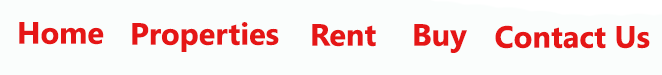
<style>
.page{position:relative;width:662px;height:75px;background:#fafdfc}
.page>*{position:absolute;margin:0}
.t1{font:30.7px "LeelawadeeUI-Bold";color:#e51616}
</style>
<div class="page">
<p class="t1" style="left:19px;top:22px;width:85px;height:23px">Home</p>
<p class="t1" style="left:132px;top:22px;width:147px;height:30px">Properties</p>
<p class="t1" style="left:312px;top:24px;width:64px;height:23px">Rent</p>
<p class="t1" style="left:414px;top:24px;width:53px;height:29px">Buy</p>
<p class="t1" style="left:495px;top:25px;width:155px;height:24px">Contact Us</p>
</div>
